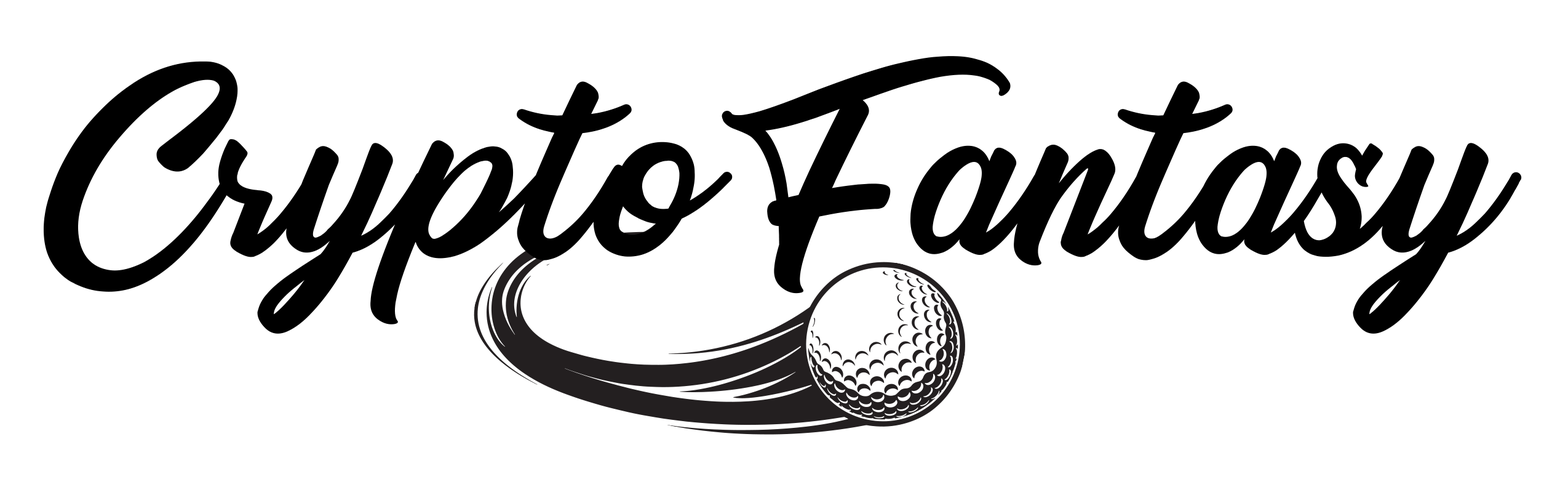
<style>
.page{position:relative;width:1568px;height:487px;background:#ffffff}
.page>*{position:absolute;margin:0}
.t1{font:230.7px "RouttageRegular";color:#000000}
</style>
<div class="page">
<p class="t1" style="left:44px;top:56px;width:1478px;height:277px">CryptoFantasy</p>
</div>
